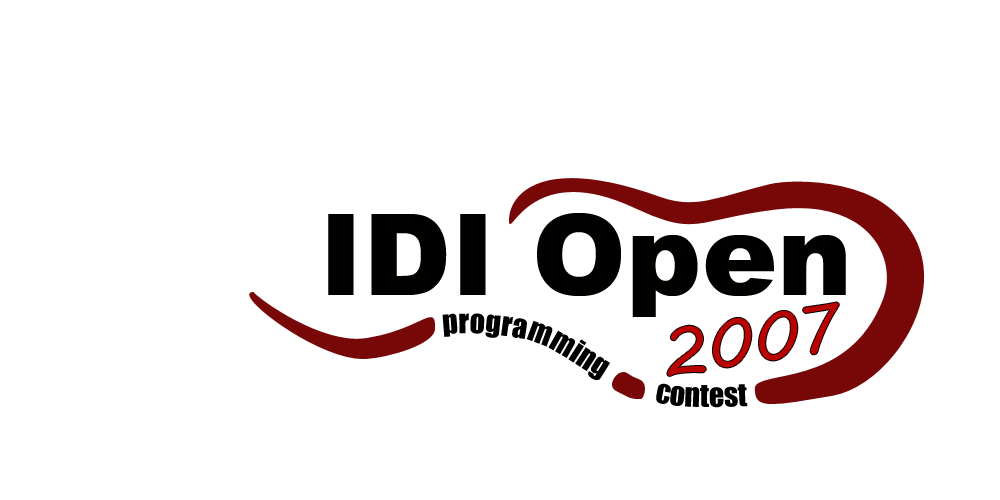
<style>
.page{position:relative;width:1000px;height:500px;background:#ffffff}
.page>*{position:absolute;margin:0}
.t1{font:112.9px "Arial-Black";color:#010100}
.t2{font:66px "MVBoli";color:#b90202}
.t3{font:30px "Impact";color:#000000}
</style>
<div class="page">
<p class="t1" style="left:328px;top:213px;width:518px;height:104px">IDI Open</p>
<p class="t2" style="left:667px;top:302px;width:172px;height:74px;rotate:-9deg">2007</p>
<p class="t3" style="left:442px;top:313px;width:306px;height:95px">programming           contest</p>
</div>
